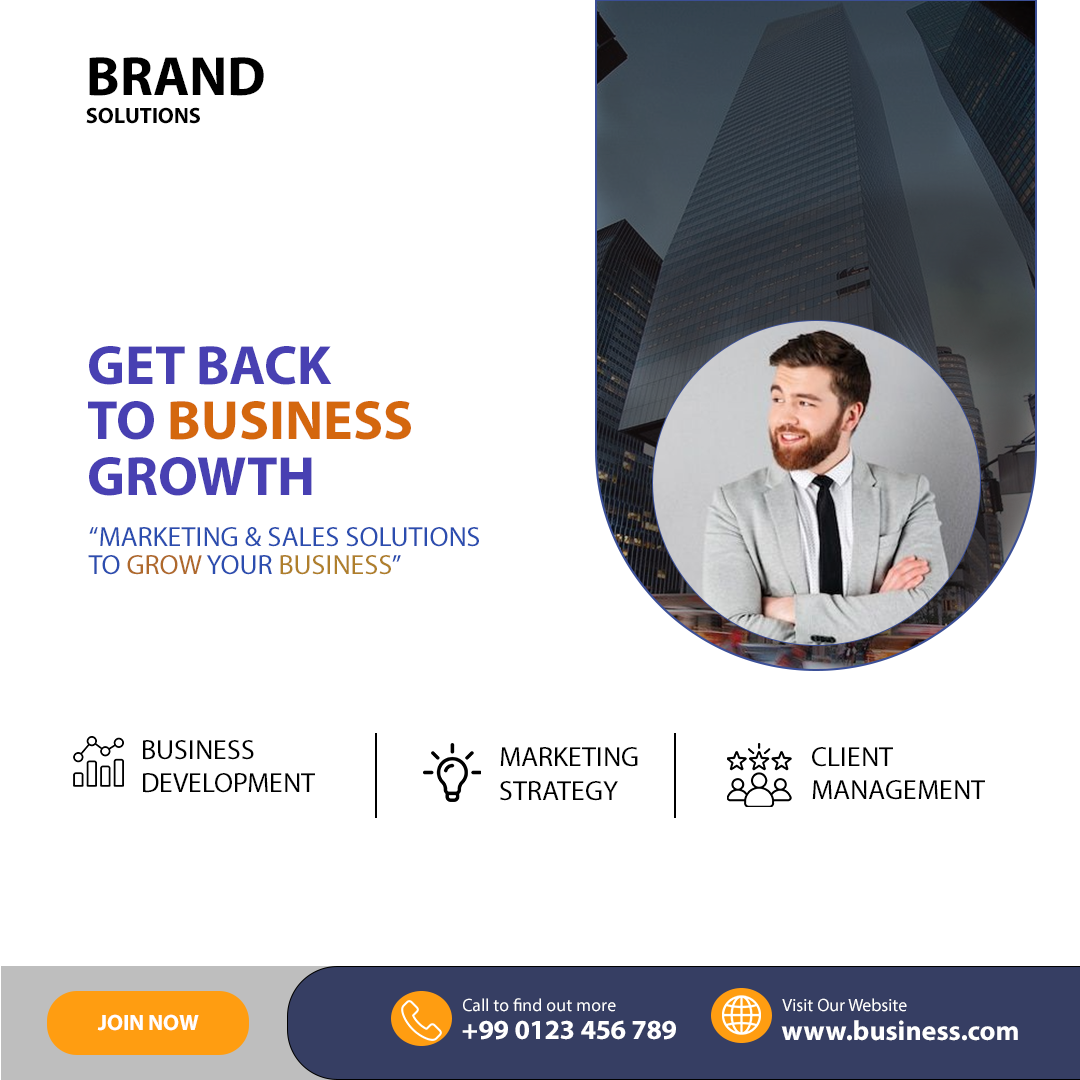
<style>
.page{position:relative;width:1080px;height:1080px;background:#ffffff}
.page>*{position:absolute;margin:0}
.t1{font:22.2px/27.8px "MyriadPro-Bold";color:#000000}
.t2{font:55.6px/55.6px "MyriadPro-Bold";color:#000000}
.t3{font:55.6px/55.6px "MyriadPro-Bold";color:#4840b2}
.t4{font:55.6px/55.6px "MyriadPro-Bold";color:#d4670e}
.t5{font:27.8px/27.8px "MyriadPro-Regular";color:#2b4daf}
.t6{font:27.8px/27.8px "MyriadPro-Regular";color:#af692b}
.t7{font:27.8px/27.8px "MyriadPro-Regular";color:#af7f2b}
.t8{font:27.8px/33.3px "MyriadPro-Regular";color:#000000}
.t9{font:17.8px "MyriadPro-Regular";color:#ffffff}
.t10{font:22.2px "MyriadPro-Bold";color:#ffffff}
.t11{font:27.8px "MyriadPro-Bold";color:#ffffff}
</style>
<div class="page">
<p class="t1" style="left:86px;top:57px;width:178px;height:67px"><span class="t2">BRAND <br></span>SOLUTIONS</p>
<p class="t3" style="left:88px;top:346px;width:323px;height:150px">GET BACK <br>TO <span class="t4">BUSINESS <br></span>GROWTH</p>
<p class="t5" style="left:88px;top:527px;width:391px;height:48px">“MARKETING &amp; SALES SOLUTIONS<br>TO <span class="t6">GROW </span>YOUR <span class="t7">BUSINESS</span>”</p>
<p class="t8" style="left:143px;top:740px;width:172px;height:53px">BUSINESS<br>DEVELOPMENT</p>
<p class="t8" style="left:500px;top:747px;width:138px;height:54px">MARKETING<br>STRATEGY</p>
<p class="t8" style="left:812px;top:747px;width:173px;height:53px">CLIENT<br>MANAGEMENT</p>
<p class="t9" style="left:463px;top:998px;width:153px;height:14px">Call to find out more</p>
<p class="t9" style="left:782px;top:998px;width:125px;height:14px">Visit Our Website</p>
<p class="t10" style="left:97px;top:1014px;width:102px;height:17px">JOIN NOW</p>
<p class="t11" style="left:462px;top:1020px;width:214px;height:20px">+99 0123 456 789</p>
<p class="t11" style="left:781px;top:1020px;width:237px;height:21px">www.business.com</p>
</div>
